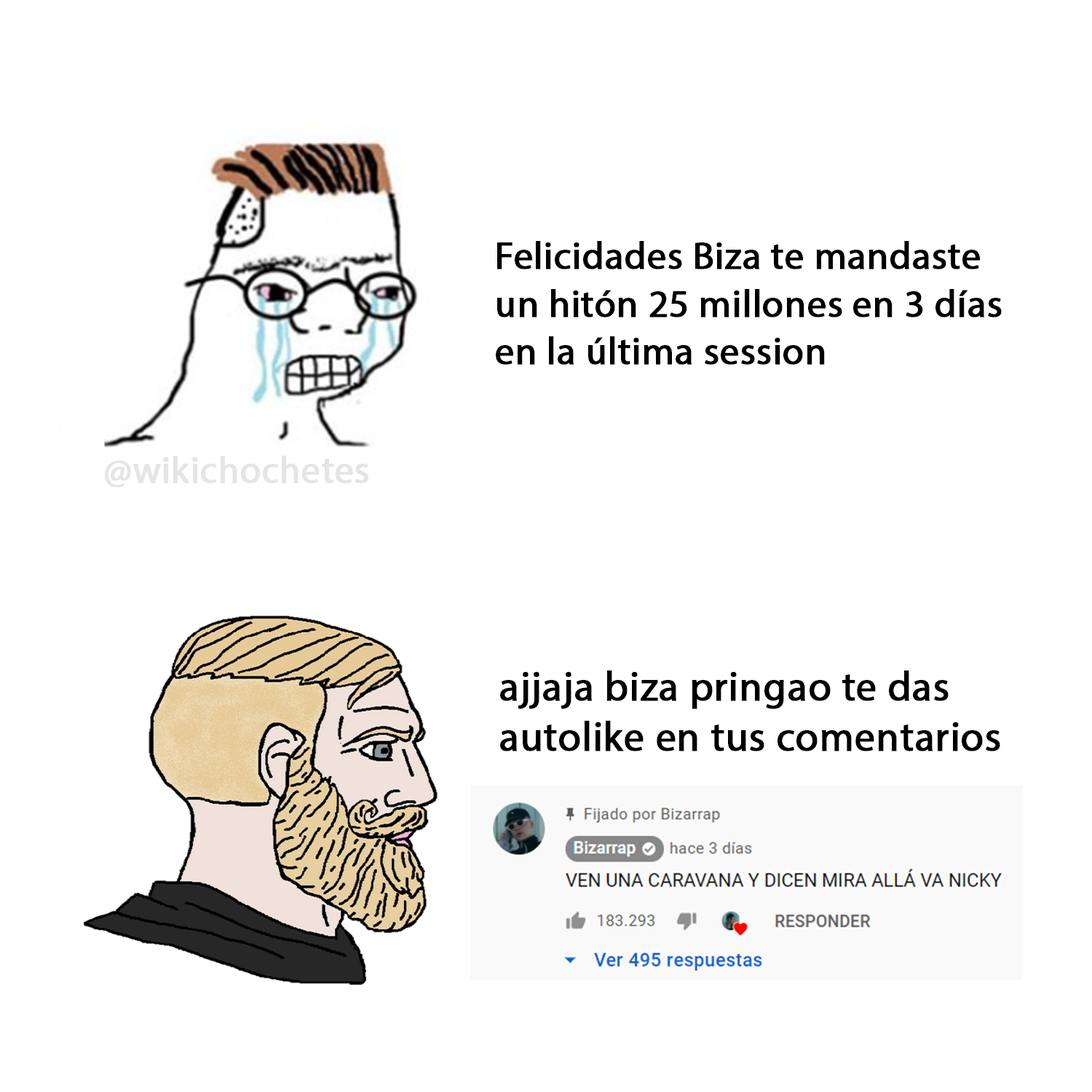
<style>
.page{position:relative;width:1092px;height:1092px;background:#ffffff}
.page>*{position:absolute;margin:0}
.t1{font:38.4px "MyriadPro-Regular";color:#000000;font-weight:bold}
.t2{font:37.6px "MyriadPro-Regular";color:#e5e5e5;font-weight:bold}
.t3{font:41px "MyriadPro-Regular";color:#000000;font-weight:bold}
</style>
<div class="page">
<p class="t1" style="left:496px;top:241px;width:506px;height:124px">Felicidades Biza te mandaste<br>un hitón 25 millones en 3 días<br>en la última session</p>
<p class="t2" style="left:105px;top:456px;width:263px;height:32px">@wikichochetes</p>
<p class="t3" style="left:500px;top:670px;width:500px;height:81px">ajjaja biza pringao te das<br>autolike en tus comentarios</p>
</div>
